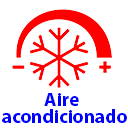
<style>
.page{position:relative;width:128px;height:128px;background:#ffffff}
.page>*{position:absolute;margin:0}
.t1{font:19px "MyriadPro-Bold";color:#0000ff}
</style>
<div class="page">
<p class="t1" style="left:44px;top:93px;width:35px;height:13px">Aire</p>
<p class="t1" style="left:2px;top:109px;width:125px;height:14px">acondicionado</p>
</div>
